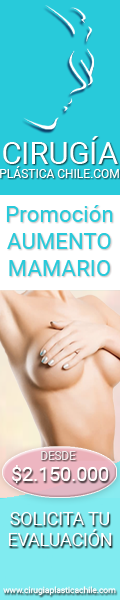
<style>
.page{position:relative;width:120px;height:600px;background:#28cada}
.page>*{position:absolute;margin:0}
.t1{font:12px "Roboto-Regular";color:#ffffff}
.t2{font:30.7px "Roboto-Regular";color:#ffffff}
.t3{font:11.5px "Roboto-Regular";color:#f0eaea}
.t4{font:19.5px "Roboto-Regular";color:#ffffff}
.t5{font:18px "Roboto-Regular";letter-spacing:-0.01em;color:#ffffff}
.t6{font:8.5px "Roboto-Regular";color:#ffffff}
</style>
<div class="page">
<p class="t1" style="left:0px;top:136px;width:119px;height:42px;text-align:center"><span class="t2">CIRUGÍA<br></span>PLÁSTICA CHILE.COM</p>
<p class="t3" style="left:41px;top:451px;width:35px;height:9px">DESDE</p>
<p class="t4" style="left:12px;top:465px;width:97px;height:18px">$2.150.000</p>
<p class="t5" style="left:8px;top:512px;width:104px;height:34px;text-align:center">SOLICITA TU<br>EVALUACIÓN</p>
<p class="t6" style="left:3px;top:586px;width:113px;height:9px">www.cirugiaplasticachile.com</p>
</div>
